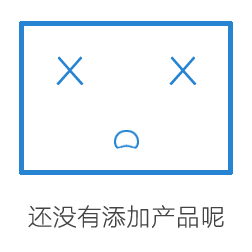
<style>
.page{position:relative;width:252px;height:252px;background:#ffffff}
.page>*{position:absolute;margin:0}
.t1{font:24px "FZLTCXHJW--GB1-0";color:#444444;font-weight:bold}
</style>
<div class="page">
<p class="t1" style="left:28px;top:205px;width:196px;height:23px">还没有添加产品呢</p>
</div>
